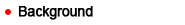
<style>
.page{position:relative;width:185px;height:25px;background:#ffffff}
.page>*{position:absolute;margin:0}
.t1{font:14px "ArialMT";letter-spacing:-0.025em;color:#000000;font-weight:bold}
</style>
<div class="page">
<p class="t1" style="left:18px;top:6px;width:75px;height:14px">Background</p>
</div>
